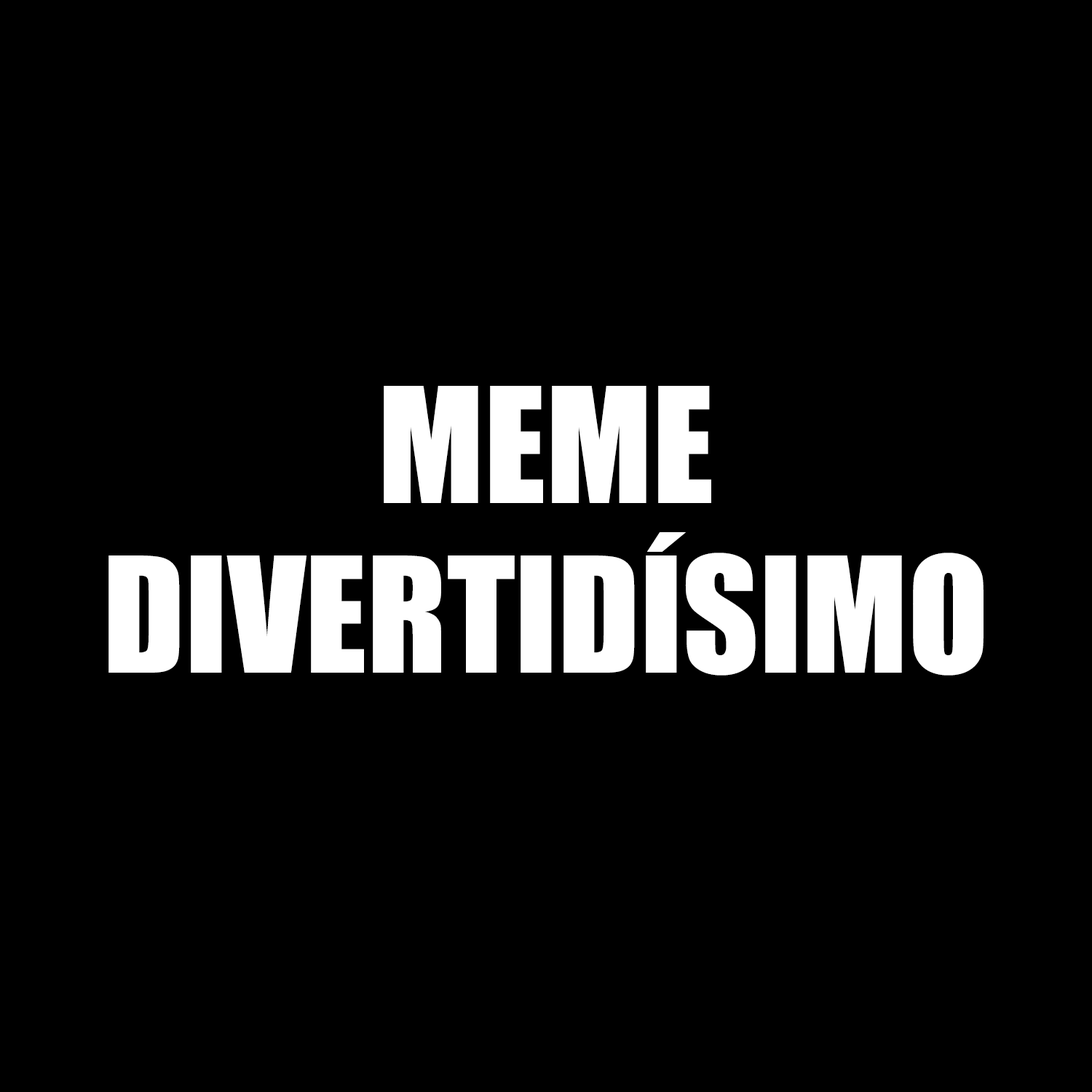
<style>
.page{position:relative;width:1092px;height:1092px;background:#000000}
.page>*{position:absolute;margin:0}
.t1{font:148.3px "Impact";color:#ffffff}
</style>
<div class="page">
<p class="t1" style="left:108px;top:386px;width:876px;height:290px;text-align:center">MEME<br>DIVERTIDÍSIMO</p>
</div>
